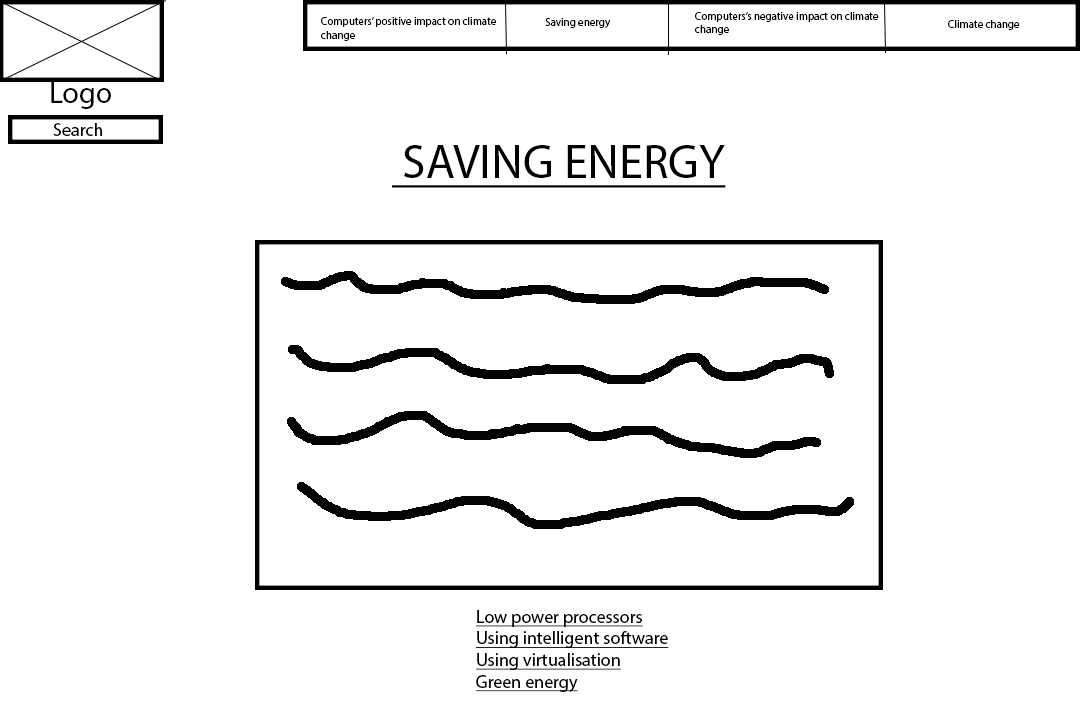
<style>
.page{position:relative;width:1080px;height:720px;background:#ffffff}
.page>*{position:absolute;margin:0}
.t1{font:11px "MyriadPro-Regular";color:#000000}
.t2{font:30px "MyriadPro-Regular";color:#000000}
.t3{font:18px "MyriadPro-Regular";color:#000000}
.t4{font:48px "MyriadPro-Regular";color:#000000;text-decoration:underline}
.t5{font:18px "MyriadPro-Regular";color:#000000;text-decoration:underline}
</style>
<div class="page">
<p class="t1" style="left:321px;top:17px;width:175px;height:24px">Computers’ positive impact on climate change</p>
<p class="t1" style="left:695px;top:12px;width:184px;height:23px">Computers’s negative impact on climate change</p>
<p class="t1" style="left:545px;top:18px;width:66px;height:10px">Saving energy</p>
<p class="t1" style="left:948px;top:20px;width:72px;height:10px">Climate change</p>
<p class="t2" style="left:51px;top:82px;width:60px;height:27px">Logo</p>
<p class="t3" style="left:53px;top:123px;width:49px;height:13px">Search</p>
<p class="t4" style="left:392px;top:145px;width:334px;height:43px">SAVING ENERGY</p>
<p class="t5" style="left:476px;top:610px;width:193px;height:82px">Low power processors<br>Using intelligent software<br>Using virtualisation<br>Green energy</p>
</div>
